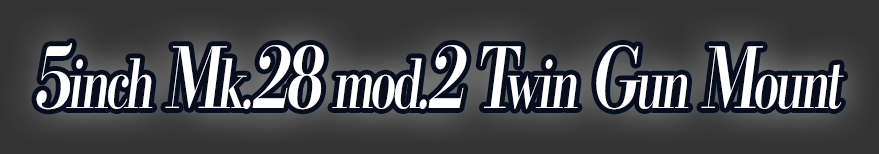
<style>
.page{position:relative;width:879px;height:154px}
.page>*{position:absolute;margin:0}
.t1{font:67.2px "KochoStd-Heavy";letter-spacing:-0.08em;color:#ffffff;font-style:italic;scale:0.71 1}
.t2{font:84px "KochoStd-Heavy";letter-spacing:-0.08em;color:#ffffff;font-style:italic;scale:0.71 1}
</style>
<div class="page">
<p class="t1" style="left:36px;top:43px;width:808px;height:67px"><span class="t2">5</span>inch<span class="t2"> M</span>k.<span class="t2">28 </span>mod.<span class="t2">2 T</span>win<span class="t2"> G</span>un<span class="t2"> M</span>ount</p>
</div>
